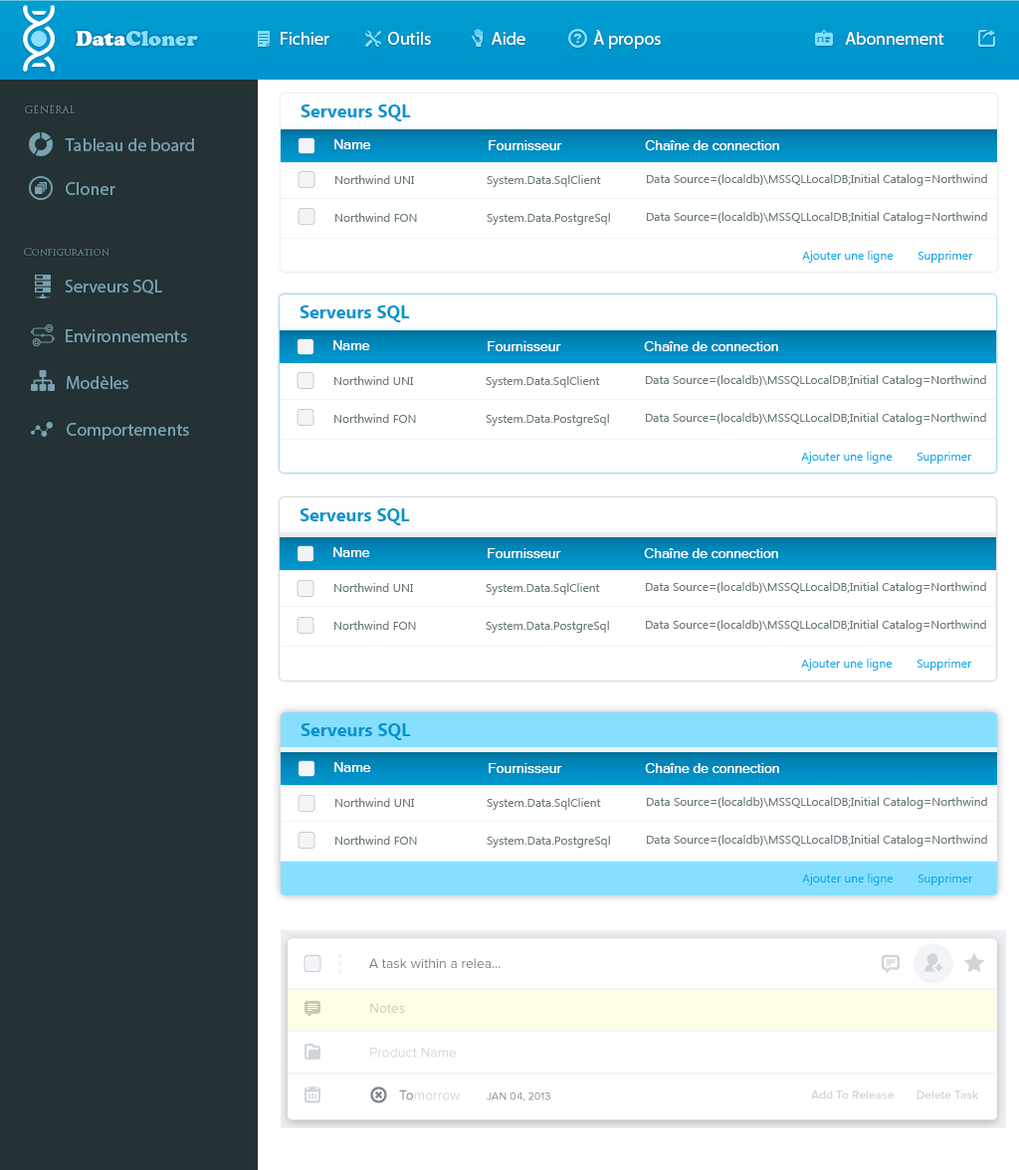
<style>
.page{position:relative;width:1019px;height:1170px;background:#ffffff}
.page>*{position:absolute;margin:0}
.t1{font:17.9px "MyriadPro-Regular";color:#ffffff}
.t2{font:19.9px "CooperBlackStd";color:#87dfff}
.t3{font:19.9px "CooperBlackStd";color:#ffffff}
.t4{font:10px "TrajanPro-Regular";color:#5b7c86}
.t5{font:17.9px "Ebrima-Bold";color:#0098cf}
.t6{font:17.9px "MyriadPro-Regular";color:#78a3b0}
.t7{font:13.9px "MicrosoftSansSerif";color:#ffffff}
.t8{font:11.9px "Ebrima";color:#6c7a7f}
.t9{font:11.9px "Ebrima";color:#0098cf}
</style>
<div class="page">
<p class="t1" style="left:593px;top:30px;width:68px;height:19px">À propos</p>
<p class="t2" style="left:76px;top:31px;width:122px;height:15px"><span class="t3">Data</span>Cloner</p>
<p class="t1" style="left:281px;top:32px;width:48px;height:13px">Fichier</p>
<p class="t1" style="left:388px;top:32px;width:43px;height:13px">Outils</p>
<p class="t1" style="left:492px;top:32px;width:33px;height:13px">Aide</p>
<p class="t1" style="left:845px;top:32px;width:99px;height:13px">Abonnement</p>
<p class="t4" style="left:25px;top:103px;width:51px;height:10px">GÉNÉRAL</p>
<p class="t5" style="left:301px;top:104px;width:110px;height:17px">Serveurs SQL</p>
<p class="t6" style="left:65px;top:138px;width:129px;height:13px">Tableau de board</p>
<p class="t7" style="left:334px;top:139px;width:37px;height:10px">Name</p>
<p class="t7" style="left:489px;top:140px;width:73px;height:10px">Fournisseur</p>
<p class="t7" style="left:645px;top:140px;width:134px;height:10px">Chaîne de connection</p>
<p class="t6" style="left:66px;top:182px;width:49px;height:13px">Cloner</p>
<p class="t8" style="left:335px;top:175px;width:79px;height:9px">Northwind UNI</p>
<p class="t8" style="left:487px;top:175px;width:114px;height:12px">System.Data.SqlClient</p>
<p class="t8" style="left:647px;top:174px;width:340px;height:12px">Data Source=(localdb)\MSSQLLocalDB;Initial Catalog=Northwind</p>
<p class="t8" style="left:335px;top:213px;width:82px;height:9px">Northwind FON</p>
<p class="t8" style="left:487px;top:213px;width:123px;height:12px">System.Data.PostgreSql</p>
<p class="t8" style="left:647px;top:212px;width:340px;height:12px">Data Source=(localdb)\MSSQLLocalDB;Initial Catalog=Northwind</p>
<p class="t4" style="left:24px;top:248px;width:85px;height:8px">Configuration</p>
<p class="t9" style="left:802px;top:251px;width:92px;height:12px">Ajouter une ligne</p>
<p class="t9" style="left:917px;top:251px;width:56px;height:12px">Supprimer</p>
<p class="t6" style="left:65px;top:280px;width:97px;height:15px">Serveurs SQL</p>
<p class="t5" style="left:300px;top:305px;width:110px;height:17px">Serveurs SQL</p>
<p class="t6" style="left:66px;top:329px;width:121px;height:13px">Environnements</p>
<p class="t7" style="left:333px;top:340px;width:37px;height:10px">Name</p>
<p class="t7" style="left:488px;top:341px;width:73px;height:10px">Fournisseur</p>
<p class="t7" style="left:644px;top:341px;width:134px;height:10px">Chaîne de connection</p>
<p class="t6" style="left:67px;top:376px;width:61px;height:13px">Modèles</p>
<p class="t8" style="left:334px;top:376px;width:79px;height:9px">Northwind UNI</p>
<p class="t8" style="left:486px;top:376px;width:114px;height:12px">System.Data.SqlClient</p>
<p class="t8" style="left:646px;top:375px;width:340px;height:12px">Data Source=(localdb)\MSSQLLocalDB;Initial Catalog=Northwind</p>
<p class="t8" style="left:334px;top:414px;width:82px;height:9px">Northwind FON</p>
<p class="t8" style="left:486px;top:414px;width:123px;height:12px">System.Data.PostgreSql</p>
<p class="t8" style="left:646px;top:413px;width:340px;height:12px">Data Source=(localdb)\MSSQLLocalDB;Initial Catalog=Northwind</p>
<p class="t6" style="left:67px;top:423px;width:122px;height:17px">Comportements</p>
<p class="t9" style="left:801px;top:452px;width:92px;height:12px">Ajouter une ligne</p>
<p class="t9" style="left:916px;top:452px;width:56px;height:12px">Supprimer</p>
<p class="t5" style="left:300px;top:508px;width:110px;height:17px">Serveurs SQL</p>
<p class="t7" style="left:333px;top:547px;width:37px;height:10px">Name</p>
<p class="t7" style="left:488px;top:548px;width:73px;height:10px">Fournisseur</p>
<p class="t7" style="left:644px;top:548px;width:134px;height:10px">Chaîne de connection</p>
<p class="t8" style="left:334px;top:583px;width:79px;height:9px">Northwind UNI</p>
<p class="t8" style="left:486px;top:583px;width:114px;height:12px">System.Data.SqlClient</p>
<p class="t8" style="left:646px;top:582px;width:340px;height:12px">Data Source=(localdb)\MSSQLLocalDB;Initial Catalog=Northwind</p>
<p class="t8" style="left:334px;top:621px;width:82px;height:9px">Northwind FON</p>
<p class="t8" style="left:486px;top:621px;width:123px;height:12px">System.Data.PostgreSql</p>
<p class="t8" style="left:646px;top:620px;width:340px;height:12px">Data Source=(localdb)\MSSQLLocalDB;Initial Catalog=Northwind</p>
<p class="t9" style="left:801px;top:659px;width:92px;height:12px">Ajouter une ligne</p>
<p class="t9" style="left:916px;top:659px;width:56px;height:12px">Supprimer</p>
<p class="t5" style="left:301px;top:723px;width:110px;height:17px">Serveurs SQL</p>
<p class="t7" style="left:334px;top:762px;width:37px;height:10px">Name</p>
<p class="t7" style="left:489px;top:763px;width:73px;height:10px">Fournisseur</p>
<p class="t7" style="left:645px;top:763px;width:134px;height:10px">Chaîne de connection</p>
<p class="t8" style="left:647px;top:797px;width:340px;height:12px">Data Source=(localdb)\MSSQLLocalDB;Initial Catalog=Northwind</p>
<p class="t8" style="left:335px;top:798px;width:79px;height:9px">Northwind UNI</p>
<p class="t8" style="left:487px;top:798px;width:114px;height:12px">System.Data.SqlClient</p>
<p class="t8" style="left:335px;top:836px;width:82px;height:9px">Northwind FON</p>
<p class="t8" style="left:487px;top:836px;width:123px;height:12px">System.Data.PostgreSql</p>
<p class="t8" style="left:647px;top:835px;width:340px;height:12px">Data Source=(localdb)\MSSQLLocalDB;Initial Catalog=Northwind</p>
<p class="t9" style="left:802px;top:874px;width:92px;height:12px">Ajouter une ligne</p>
<p class="t9" style="left:917px;top:874px;width:56px;height:12px">Supprimer</p>
</div>
